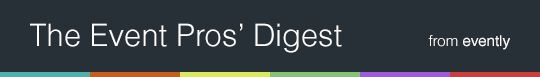
<style>
.page{position:relative;width:540px;height:77px;background:#273036}
.page>*{position:absolute;margin:0}
.t1{font:31px "Helvetica-Light";color:#ffffff}
.t2{font:15px "Helvetica";color:#ffffff}
.t3{font:15px "Helvetica-Light";color:#ffffff}
</style>
<div class="page">
<p class="t1" style="left:30px;top:23px;width:312px;height:30px">The Event Pros’ Digest</p>
<p class="t2" style="left:428px;top:35px;width:82px;height:15px"><span class="t3">from </span>evently</p>
</div>
